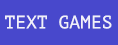
<style>
.page{position:relative;width:118px;height:45px;background:#4848cc}
.page>*{position:absolute;margin:0}
.t1{font:18px "PTMono-Regular";color:#f1f0f9}
</style>
<div class="page">
<p class="t1" style="left:5px;top:15px;width:107px;height:14px">TEXT GAMES</p>
</div>
